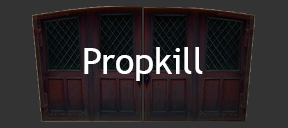
<style>
.page{position:relative;width:288px;height:128px;background:#333333}
.page>*{position:absolute;margin:0}
.t1{font:36px "TrebuchetMS";color:#ffffff}
</style>
<div class="page">
<p class="t1" style="left:84px;top:47px;width:119px;height:34px">Propkill</p>
</div>
